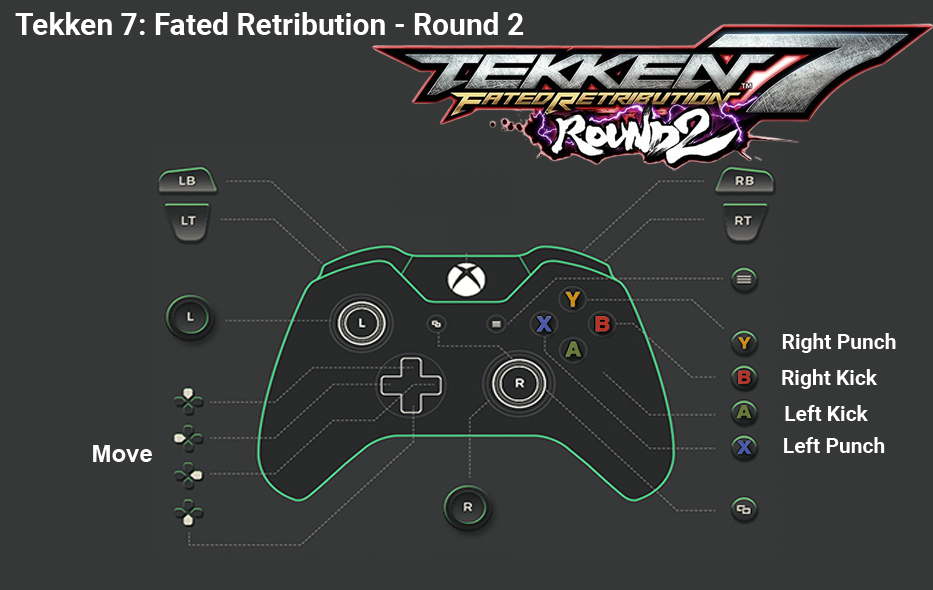
<style>
.page{position:relative;width:933px;height:590px;background:#363838}
.page>*{position:absolute;margin:0}
.t1{font:30px "Roboto-Bold";color:#ffffff}
.t2{font:21px "Roboto-Bold";color:#ffffff}
.t3{font:24px "Arial-BoldMT";color:#fefefe}
</style>
<div class="page">
<p class="t1" style="left:15px;top:12px;width:509px;height:23px">Tekken 7: Fated Retribution - Round 2</p>
<p class="t2" style="left:782px;top:333px;width:114px;height:20px">Right Punch</p>
<p class="t2" style="left:782px;top:369px;width:96px;height:20px">Right Kick</p>
<p class="t2" style="left:785px;top:405px;width:83px;height:16px">Left Kick</p>
<p class="t2" style="left:784px;top:437px;width:101px;height:16px">Left Punch</p>
<p class="t3" style="left:93px;top:445px;width:59px;height:17px">Move</p>
</div>
